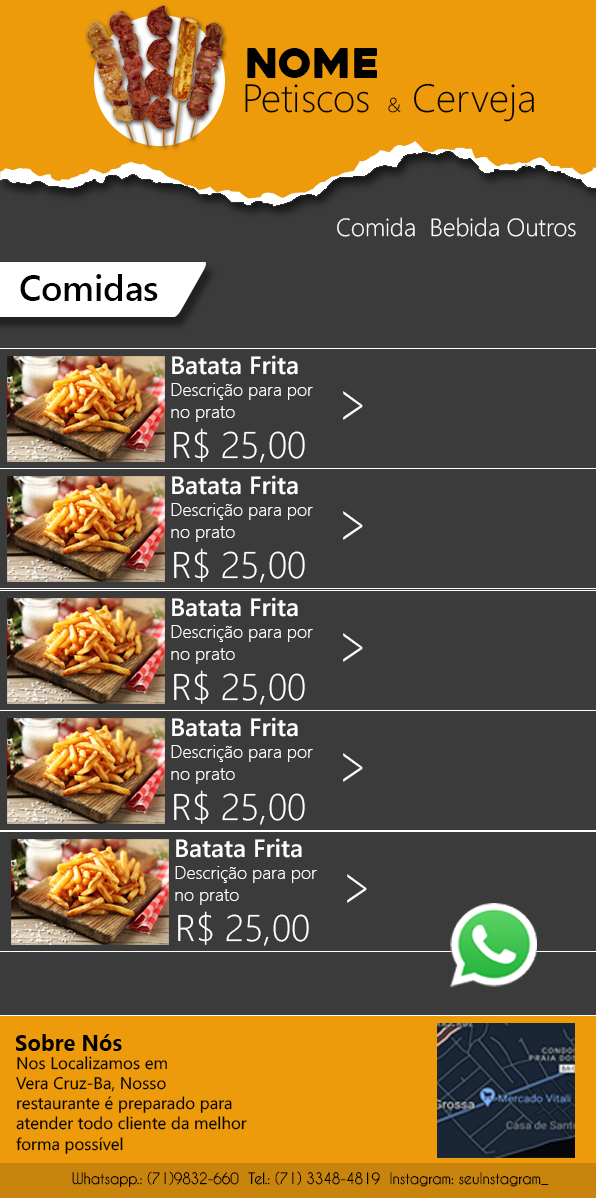
<style>
.page{position:relative;width:596px;height:1198px;background:#3c3b3b}
.page>*{position:absolute;margin:0}
.t1{font:40.7px "Heavitas";color:#000000}
.t2{font:39.4px "SegoeUI-Light";color:#000000}
.t3{font:20px "SegoeUI-Light";color:#000000}
.t4{font:24.9px "SegoeUI-Light";color:#ffffff}
.t5{font:35.5px "SegoeUI-Semibold";color:#000000}
.t6{font:25.1px "SegoeUI-Semibold";color:#ffffff}
.t7{font:18px "SegoeUI-Light";color:#ffffff}
.t8{font:27.3px "SegoeUI-Light";color:#ffffff;scale:1.88 1}
.t9{font:36.9px "SegoeUI-Light";color:#ffffff}
.t10{font:22.8px "SegoeUI-Bold";color:#000000;scale:0.97 1}
.t11{font:16.7px "SegoeUI";color:#000000}
.t12{font:14.7px "CaviarDreams";color:#000000;scale:0.95 1}
</style>
<div class="page">
<p class="t1" style="left:247px;top:48px;width:130px;height:30px">Nome</p>
<p class="t2" style="left:245px;top:83px;width:289px;height:39px">Petiscos <span class="t3"> &amp;</span> Cerveja</p>
<p class="t4" style="left:337px;top:217px;width:239px;height:20px">Comida  Bebida Outros</p>
<p class="t5" style="left:20px;top:274px;width:138px;height:27px">Comidas</p>
<p class="t6" style="left:172px;top:355px;width:126px;height:20px">Batata Frita</p>
<p class="t7" style="left:171px;top:383px;width:142px;height:39px">Descrição para por<br>no prato</p>
<p class="t8" style="left:343px;top:391px;width:20px;height:29px;rotate:-90deg">V</p>
<p class="t9" style="left:174px;top:428px;width:131px;height:35px">R$ 25,00</p>
<p class="t6" style="left:172px;top:475px;width:126px;height:20px">Batata Frita</p>
<p class="t7" style="left:171px;top:503px;width:142px;height:39px">Descrição para por<br>no prato</p>
<p class="t8" style="left:343px;top:511px;width:20px;height:29px;rotate:-90deg">V</p>
<p class="t9" style="left:174px;top:548px;width:131px;height:35px">R$ 25,00</p>
<p class="t6" style="left:172px;top:597px;width:126px;height:20px">Batata Frita</p>
<p class="t7" style="left:171px;top:625px;width:142px;height:39px">Descrição para por<br>no prato</p>
<p class="t8" style="left:343px;top:633px;width:20px;height:29px;rotate:-90deg">V</p>
<p class="t9" style="left:174px;top:670px;width:131px;height:35px">R$ 25,00</p>
<p class="t6" style="left:172px;top:717px;width:126px;height:20px">Batata Frita</p>
<p class="t7" style="left:171px;top:745px;width:142px;height:39px">Descrição para por<br>no prato</p>
<p class="t8" style="left:343px;top:753px;width:20px;height:29px;rotate:-90deg">V</p>
<p class="t9" style="left:174px;top:790px;width:131px;height:35px">R$ 25,00</p>
<p class="t6" style="left:176px;top:838px;width:126px;height:20px">Batata Frita</p>
<p class="t7" style="left:175px;top:866px;width:142px;height:39px">Descrição para por<br>no prato</p>
<p class="t8" style="left:347px;top:874px;width:20px;height:29px;rotate:-90deg">V</p>
<p class="t9" style="left:178px;top:911px;width:131px;height:35px">R$ 25,00</p>
<p class="t10" style="left:16px;top:1034px;width:106px;height:17px">Sobre Nós</p>
<p class="t11" style="left:16px;top:1056px;width:231px;height:98px">Nos Localizamos em<br>Vera Cruz-Ba, Nosso <br>restaurante é preparado para<br>atender todo cliente da melhor <br>forma possível</p>
<p class="t12" style="left:72px;top:1171px;width:477px;height:16px">Whatsapp.: (71)9832-660  Tel.: (71) 3348-4819  Instagram: seuInstagram_</p>
</div>
